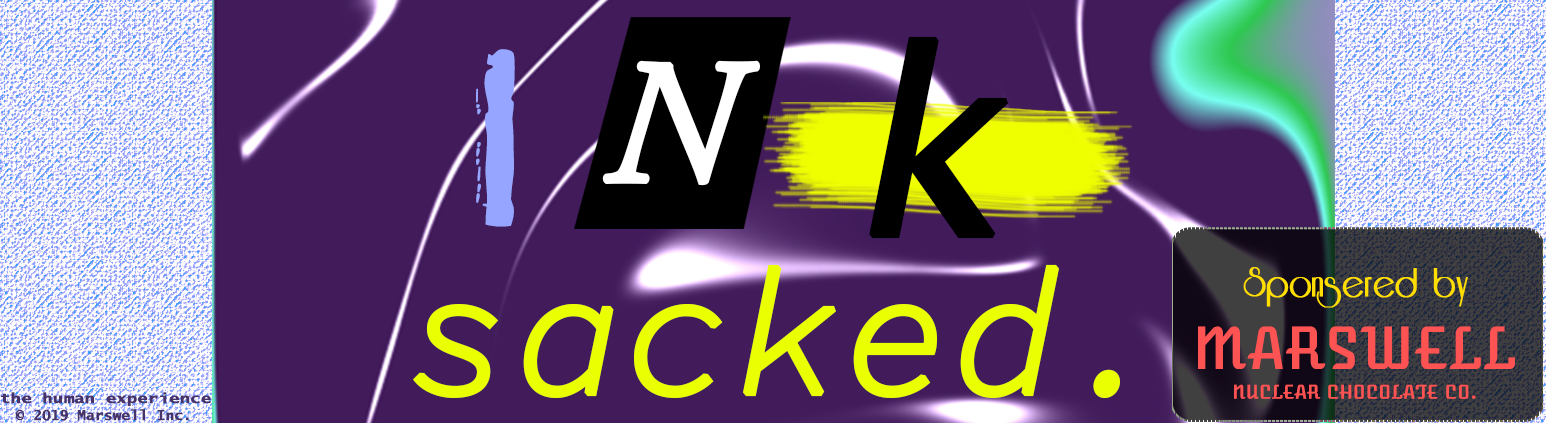
<style>
.page{position:relative;width:1546px;height:423px;background:#411b5a}
.page>*{position:absolute;margin:0}
.t1{font:252.7px "LucidaSans-TypewriterOblique";color:#000000;font-weight:bold}
.t2{font:174.4px "CopystructNormal";color:#96a5ff;font-weight:bold}
.t3{font:174.4px "AGaramondPro-Italic";color:#ffffff;font-weight:bold}
.t4{font:174.4px "SourceCodePro-LightIt";color:#eaff02;font-weight:bold}
.t5{font:46.7px "Riesling";color:#ffde00;font-weight:bold}
.t6{font:56.1px "AtomicAge-Regular";color:#fe5353;font-weight:bold}
.t7{font:18.7px "AtomicAge-Regular";color:#fe5353;font-weight:bold}
.t8{font:14px "LucidaSans-TypewriterBold";color:#47336a;font-weight:bold;scale:1.2 1}
.t9{font:14px "LucidaSans-TypewriterBold";color:#47336a;font-weight:bold}
</style>
<div class="page">
<p class="t1" style="left:869px;top:36px;width:140px;height:203px">k</p>
<p class="t2" style="left:476px;top:49px;width:39px;height:178px">I</p>
<p class="t3" style="left:602px;top:60px;width:158px;height:126px">N</p>
<p class="t4" style="left:413px;top:264px;width:707px;height:135px">sacked.</p>
<p class="t5" style="left:1243px;top:267px;width:225px;height:41px">Sponsered by</p>
<p class="t6" style="left:1198px;top:326px;width:317px;height:43px">MARSWELL</p>
<p class="t7" style="left:1234px;top:384px;width:242px;height:15px">NUCLEAR CHOCOLATE CO.</p>
<p class="t8" style="left:1px;top:392px;width:210px;height:14px">the human experience</p>
<p class="t9" style="left:15px;top:409px;width:174px;height:12px">© 2019 Marswell Inc.</p>
</div>
